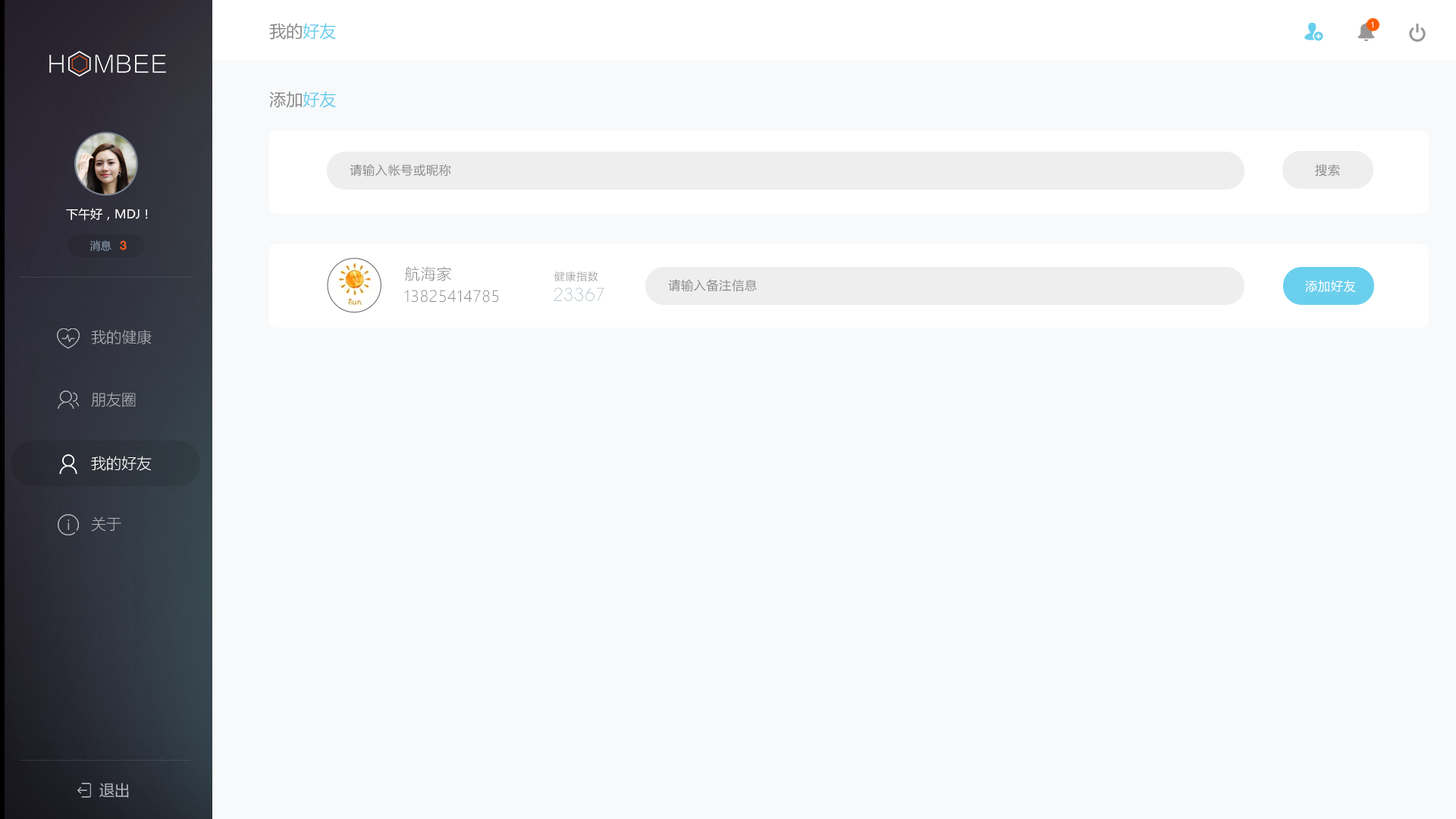
<style>
.page{position:relative;width:1456px;height:819px;background:#f8f9fa}
.page>*{position:absolute;margin:0}
.t1{font:16.7px "MicrosoftYaHei";color:#888888}
.t2{font:16.7px "MicrosoftYaHei";color:#6acfed}
.t3{font:7.6px "MicrosoftYaHei";color:#ffffff}
.t4{font:12.1px "MicrosoftYaHei";letter-spacing:0.05em;color:#888888}
.t5{font:12.1px "MicrosoftYaHei";color:#ffffff}
.t6{font:10.6px "MicrosoftYaHei";color:#869bac}
.t7{font:12.1px "HelveticaNeue-Bold";color:#eb5b21}
.t8{font:15.2px "MicrosoftYaHeiLight";letter-spacing:0.05em;color:#888888}
.t9{font:10.6px "MicrosoftYaHeiLight";letter-spacing:0.05em;color:#888888}
.t10{font:12.1px "MicrosoftYaHei";letter-spacing:0.05em;color:#ffffff}
.t11{font:16.7px "AvantGardeXLight";letter-spacing:0.05em;color:#a4b4bd}
.t12{font:15.2px "MicrosoftYaHeiLight";color:#b1b1b9}
.t13{font:15.2px "MicrosoftYaHeiLight";color:#ffffff}
.t14{font:15.2px "MicrosoftYaHei";color:#b1b1b9}
</style>
<div class="page">
<p class="t1" style="left:269px;top:23px;width:67px;height:16px">我的<span class="t2">好友</span></p>
<p class="t3" style="left:1371px;top:21px;width:2px;height:7px">1</p>
<p class="t1" style="left:269px;top:91px;width:67px;height:17px">添加<span class="t2">好友</span></p>
<p class="t4" style="left:350px;top:164px;width:101px;height:13px">请输入帐号或昵称</p>
<p class="t4" style="left:1315px;top:164px;width:25px;height:13px">搜索</p>
<p class="t5" style="left:66px;top:208px;width:82px;height:13px">下午好，MDJ！</p>
<p class="t6" style="left:90px;top:240px;width:21px;height:11px">消息</p>
<p class="t7" style="left:120px;top:240px;width:7px;height:10px">3</p>
<p class="t8" style="left:405px;top:266px;width:46px;height:15px">航海家</p>
<p class="t9" style="left:554px;top:271px;width:44px;height:10px">健康指数</p>
<p class="t4" style="left:668px;top:279px;width:89px;height:13px">请输入备注信息</p>
<p class="t10" style="left:1305px;top:280px;width:51px;height:13px">添加好友</p>
<p class="t8" style="left:404px;top:290px;width:95px;height:13px">13825414785</p>
<p class="t11" style="left:554px;top:287px;width:50px;height:14px">23367</p>
<p class="t12" style="left:91px;top:330px;width:61px;height:14px">我的健康</p>
<p class="t12" style="left:91px;top:392px;width:45px;height:15px">朋友圈</p>
<p class="t13" style="left:91px;top:456px;width:61px;height:15px">我的好友</p>
<p class="t12" style="left:91px;top:516px;width:30px;height:16px">关于</p>
<p class="t14" style="left:99px;top:783px;width:30px;height:15px">退出</p>
</div>
